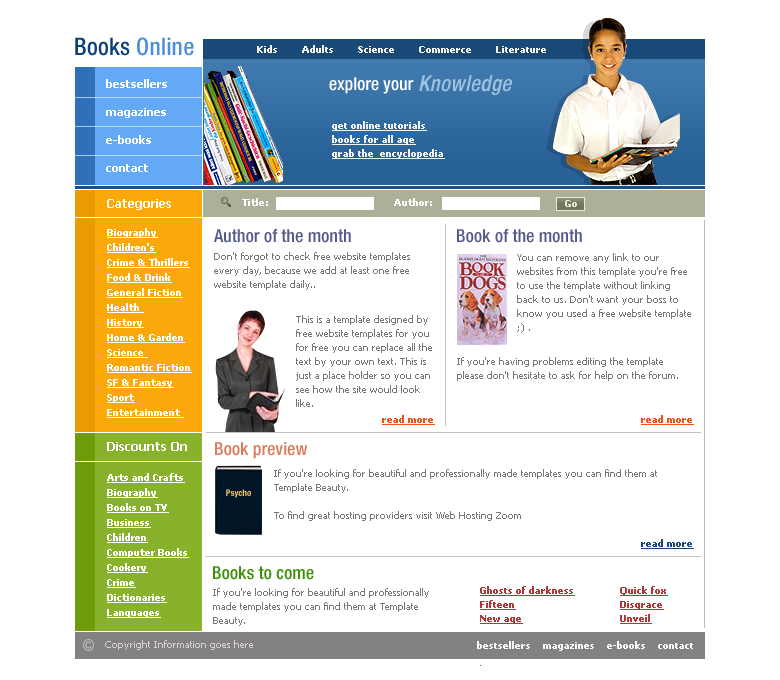
<style>
.page{position:relative;width:780px;height:680px;background:#ffffff}
.page>*{position:absolute;margin:0}
.t1{font:24px "HelveticaNeue-MediumCond";color:#4d8ed9}
.t2{font:24px "HelveticaNeue-MediumCond";color:#0e3f77}
.t3{font:9px "Tahoma-Bold";color:#f8f5f1}
.t4{font:18px "HelveticaNeue-MediumCond";letter-spacing:-0.005em;color:#ffffff}
.t5{font:22px "HelveticaNeue-MediumCondObl";color:#a1c3e1}
.t6{font:11px/28px "Tahoma-Bold";color:#ffffff}
.t7{font:9px/14px "Tahoma-Bold";color:#f3f2f2;text-decoration:underline}
.t8{font:9px "Verdana-Bold";color:#ffffff}
.t9{font:12px "Tahoma-Bold";color:#ffffff}
.t10{font:9px "Verdana-Bold";color:#e6ead5}
.t11{font:9px/15px "Verdana-Bold";color:#ffffff;text-decoration:underline}
.t12{font:18px "HelveticaNeue-MediumCond";color:#545b89}
.t13{font:10px/14px "Tahoma";color:#777675}
.t14{font:10px "Tahoma-Bold";color:#ed5411;text-decoration:underline}
.t15{font:18px "HelveticaNeue-MediumCond";color:#d97b5a}
.t16{font:8.9px "HelveticaNeue-BoldCond";color:#f4c56a}
.t17{font:10px "Tahoma-Bold";color:#194a77;text-decoration:underline}
.t18{font:18px "HelveticaNeue-MediumCond";color:#3f8f08}
.t19{font:9px/14px "Tahoma-Bold";color:#b03737;text-decoration:underline}
.t20{font:10px "Tahoma";color:#dbd1d1}
.t21{font:9px "Tahoma-Bold";color:#f8f8f8}
</style>
<div class="page">
<p class="t1" style="left:75px;top:37px;width:119px;height:19px"><span class="t2">Books </span>Online</p>
<p class="t3" style="left:257px;top:45px;width:289px;height:8px">Kids        Adults        Science        Commerce        Literature</p>
<p class="t4" style="left:329px;top:77px;width:85px;height:17px">explore your</p>
<p class="t5" style="left:419px;top:75px;width:93px;height:20px">Knowledge</p>
<p class="t6" style="left:106px;top:79px;width:61px;height:93px;text-align:justify">bestsellers<br>magazines<br>e-books<br>contact</p>
<p class="t7" style="left:332px;top:121px;width:113px;height:38px;text-align:justify">get online tutorials<br>books for all age<br>grab the  encyclopedia</p>
<p class="t8" style="left:242px;top:198px;width:26px;height:8px">Title:</p>
<p class="t8" style="left:394px;top:198px;width:38px;height:8px">Author:</p>
<p class="t9" style="left:107px;top:199px;width:64px;height:11px">Categories</p>
<p class="t10" style="left:565px;top:200px;width:12px;height:7px">Go</p>
<p class="t11" style="left:107px;top:228px;width:85px;height:190px">Biography<br>Children's<br>Crime &amp; Thrillers<br>Food &amp; Drink<br>General Fiction<br>Health <br>History<br>Home &amp; Garden<br>Science <br>Romantic Fiction<br>SF &amp; Fantasy<br>Sport<br>Entertainment</p>
<p class="t12" style="left:214px;top:229px;width:137px;height:14px">Author of the month</p>
<p class="t12" style="left:457px;top:229px;width:125px;height:14px">Book of the month</p>
<p class="t13" style="left:214px;top:252px;width:196px;height:38px">Don't forgot to check free website templates every day, because we add at least one free website template daily..</p>
<p class="t13" style="left:517px;top:253px;width:174px;height:80px">You can remove any link to our websites from this template you're free to use the template without linking back to us. Don't want your boss to know you used a free website template ;) .</p>
<p class="t13" style="left:296px;top:315px;width:136px;height:92px">This is a template designed by free website templates for you for free you can replace all the text by your own text. This is just a place holder so you can see how the site would look like.</p>
<p class="t13" style="left:457px;top:357px;width:221px;height:24px">If you're having problems editing the template please don't hesitate to ask for help on the forum.</p>
<p class="t14" style="left:382px;top:415px;width:53px;height:10px">read more</p>
<p class="t14" style="left:641px;top:415px;width:53px;height:10px">read more</p>
<p class="t9" style="left:107px;top:442px;width:80px;height:9px">Discounts On</p>
<p class="t15" style="left:215px;top:442px;width:93px;height:17px">Book preview</p>
<p class="t11" style="left:107px;top:473px;width:82px;height:145px">Arts and Crafts<br>Biography<br>Books on TV<br>Business<br>Children<br>Computer Books<br>Cookery<br>Crime<br>Dictionaries<br>Languages</p>
<p class="t13" style="left:274px;top:469px;width:383px;height:52px">If you're looking for beautiful and professionally made templates you can find them at Template Beauty.<br><br>To find great hosting providers visit Web Hosting Zoom</p>
<p class="t16" style="left:226px;top:489px;width:25px;height:9px">Psycho</p>
<p class="t17" style="left:641px;top:539px;width:53px;height:10px">read more</p>
<p class="t18" style="left:213px;top:566px;width:101px;height:14px">Books to come</p>
<p class="t13" style="left:213px;top:588px;width:216px;height:38px">If you're looking for beautiful and professionally made templates you can find them at Template Beauty.</p>
<p class="t19" style="left:480px;top:586px;width:95px;height:80px">Ghosts of darkness<br>Fifteen<br>New age</p>
<p class="t19" style="left:620px;top:586px;width:48px;height:52px">Quick fox<br>Disgrace<br>Unveil</p>
<p class="t20" style="left:105px;top:640px;width:148px;height:10px">Copyright Information goes here</p>
<p class="t21" style="left:477px;top:641px;width:216px;height:10px">bestsellers    magazines    e-books    contact</p>
</div>
